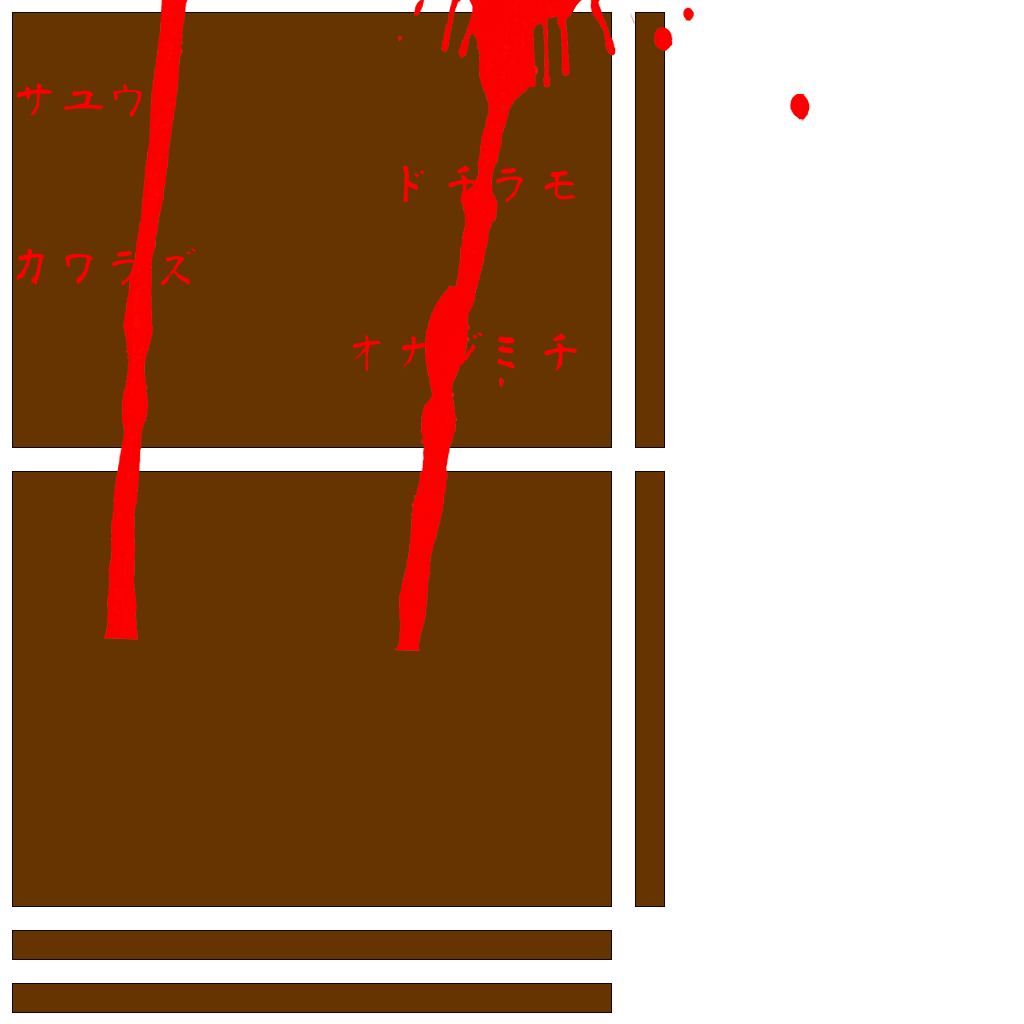
<style>
.page{position:relative;width:1024px;height:1024px;background:#653400}
.page>*{position:absolute;margin:0}
.t1{font:48px "aoyagireisyosimo2";color:#ff0000}
.t2{font:36px "DFKaiShu-SB-Estd-BF";color:#ff0000}
</style>
<div class="page">
<p class="t1" style="left:16px;top:83px;width:561px;height:288px"><span class="t2">　　　　　　　　　　　　　　　　</span>サユウ　　　　　　　　　　　　　　　　　ドチラモカワラズ　　　　　　　　　　　　　　　オナジミチ</p>
</div>
